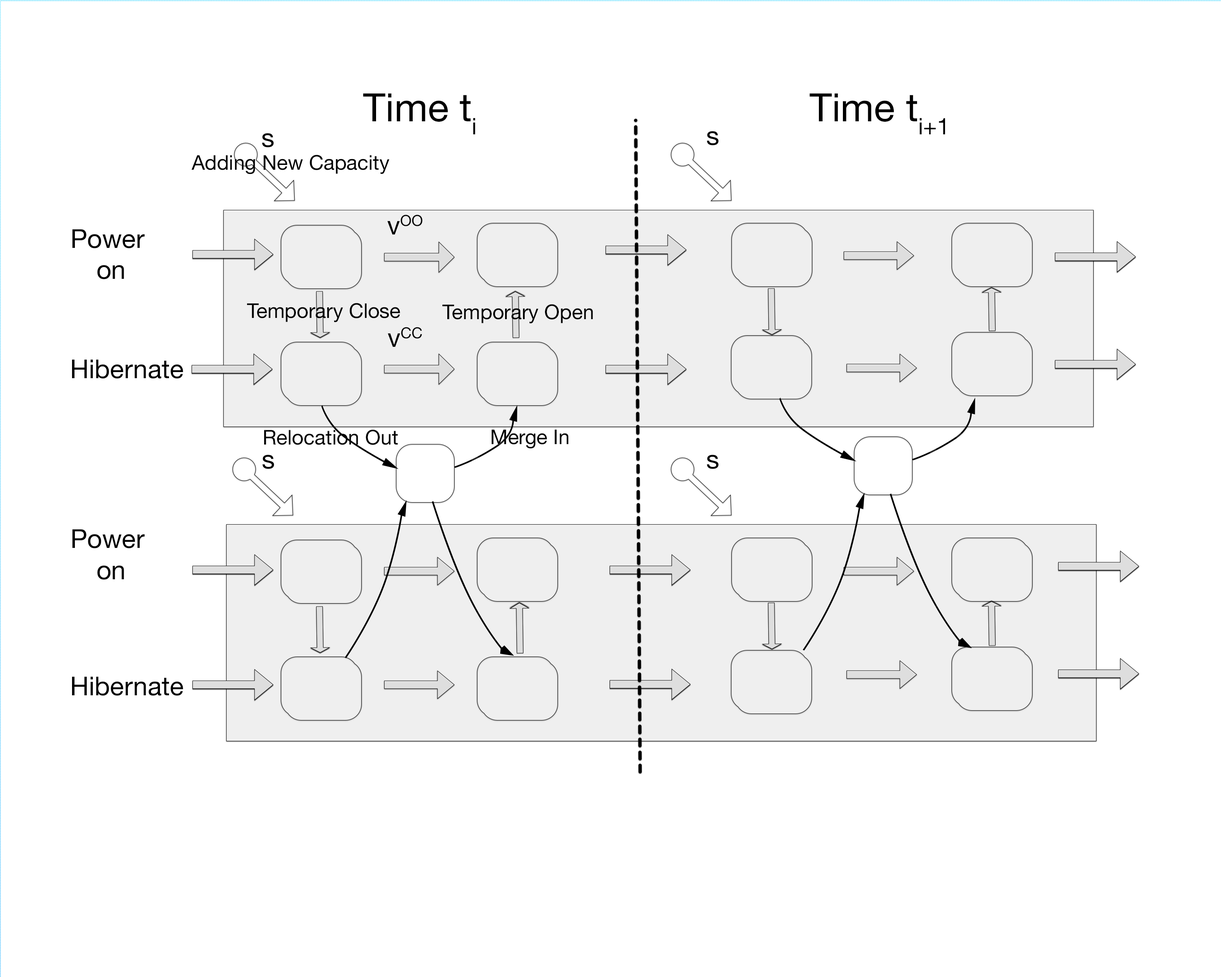
<style>
.page{position:relative;width:1221px;height:977px;background:#ffffff}
.page>*{position:absolute;margin:0}
.t1{font:39.1px "HelveticaNeue";color:#000000}
.t2{font:26.1px "HelveticaNeue";color:#000000}
.t3{font:4.9px "HelveticaNeue";color:#000000}
.t4{font:20.4px "HelveticaNeue";color:#000000}
</style>
<div class="page">
<p class="t1" style="left:363px;top:93px;width:112px;height:41px">Time ti</p>
<p class="t1" style="left:809px;top:93px;width:136px;height:41px">Time ti+1</p>
<p class="t2" style="left:262px;top:133px;width:12px;height:14px">s</p>
<p class="t2" style="left:707px;top:131px;width:12px;height:14px">s</p>
<p class="t3" style="left:191px;top:155px;width:198px;height:19px;text-align:center">Adding New Capacity</p>
<p class="t2" style="left:387px;top:214px;width:35px;height:20px">vOO</p>
<p class="t2" style="left:72px;top:229px;width:73px;height:50px;text-align:center">Power <br>on</p>
<p class="t3" style="left:247px;top:303px;width:153px;height:19px;text-align:center">Temporary Close</p>
<p class="t3" style="left:442px;top:304px;width:151px;height:20px;text-align:center">Temporary Open</p>
<p class="t2" style="left:388px;top:327px;width:34px;height:20px">vCC</p>
<p class="t2" style="left:72px;top:359px;width:111px;height:19px">Hibernate</p>
<p class="t4" style="left:264px;top:429px;width:134px;height:16px">Relocation Out</p>
<p class="t4" style="left:492px;top:429px;width:77px;height:19px">Merge In</p>
<p class="t2" style="left:262px;top:455px;width:12px;height:14px">s</p>
<p class="t2" style="left:707px;top:455px;width:12px;height:14px">s</p>
<p class="t2" style="left:72px;top:529px;width:73px;height:51px;text-align:center">Power <br>on</p>
<p class="t2" style="left:72px;top:676px;width:111px;height:19px">Hibernate</p>
</div>
